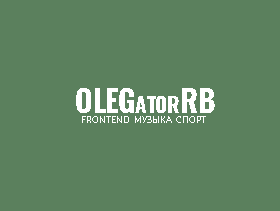
<style>
.page{position:relative;width:280px;height:211px;background:#5b805d}
.page>*{position:absolute;margin:0}
.t1{font:30px "Oswald-Bold";color:#ffffff;font-variant:small-caps}
.t2{font:8px "Montserrat-Regular";color:#ffffff;font-variant:small-caps}
</style>
<div class="page">
<p class="t1" style="left:76px;top:88px;width:139px;height:25px">OLEGatorRB</p>
<p class="t2" style="left:82px;top:116px;width:124px;height:7px">FRONTEND  МУЗЫКА  СПОРТ</p>
</div>
